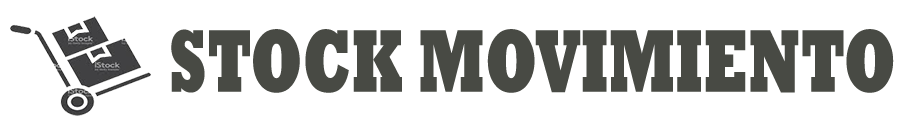
<style>
.page{position:relative;width:916px;height:132px;background:#ffffff}
.page>*{position:absolute;margin:0}
.t1{font:90.1px "Rockwell-ExtraBold";color:#484a44;scale:0.67 1}
</style>
<div class="page">
<p class="t1" style="left:171px;top:29px;width:723px;height:64px">STOCK MOVIMIENTO</p>
</div>
